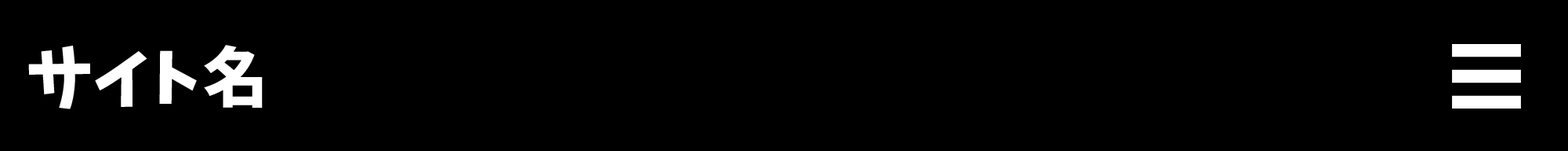
<style>
.page{position:relative;width:1568px;height:151px;background:#000000}
.page>*{position:absolute;margin:0}
.t1{font:65.3px "Keifont";color:#ffffff}
</style>
<div class="page">
<p class="t1" style="left:28px;top:45px;width:235px;height:64px">サイト名</p>
</div>
